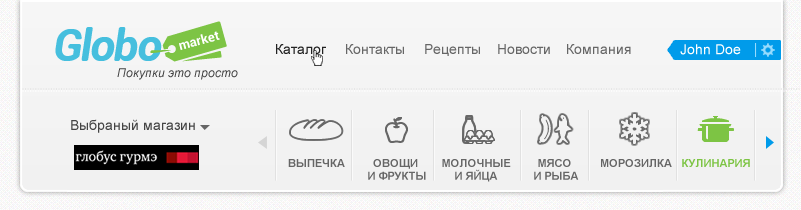
<style>
.page{position:relative;width:801px;height:210px}
.page>*{position:absolute;margin:0}
.t1{font:14px "ArialMT";color:#222222}
.t2{font:14px "ArialMT";color:#666666}
.t3{font:14px "ArialMT";color:#fefefe}
.t4{font:12px "Arial-ItalicMT";color:#444444}
.t5{font:14px "ArialMT";color:#444444}
.t6{font:11px "Arial-BoldMT";color:#666666}
.t7{font:11px/12.7px "Arial-BoldMT";color:#666666}
.t8{font:11px "Arial-BoldMT";color:#7dc444}
</style>
<div class="page">
<p class="t1" style="left:276px;top:44px;width:50px;height:10px">Каталог</p>
<p class="t2" style="left:346px;top:44px;width:58px;height:10px">Контакты</p>
<p class="t2" style="left:425px;top:44px;width:55px;height:12px">Рецепты</p>
<p class="t2" style="left:498px;top:44px;width:52px;height:10px">Новости</p>
<p class="t2" style="left:567px;top:44px;width:64px;height:10px">Компания</p>
<p class="t3" style="left:680px;top:44px;width:61px;height:11px">John Doe</p>
<p class="t4" style="left:117px;top:68px;width:121px;height:12px">Покупки это просто</p>
<p class="t5" style="left:71px;top:119px;width:124px;height:14px">Выбраный магазин</p>
<p class="t6" style="left:288px;top:159px;width:57px;height:8px">ВЫПЕЧКА</p>
<p class="t7" style="left:368px;top:159px;width:58px;height:21px;text-align:center">ОВОЩИ <br>И ФРУКТЫ</p>
<p class="t7" style="left:442px;top:159px;width:69px;height:23px;text-align:center">МОЛОЧНЫЕ<br>И ЯЙЦА</p>
<p class="t7" style="left:534px;top:159px;width:45px;height:21px;text-align:center">МЯСО <br>И РЫБА</p>
<p class="t6" style="left:601px;top:159px;width:71px;height:8px">МОРОЗИЛКА</p>
<p class="t8" style="left:682px;top:159px;width:68px;height:8px">КУЛИНАРИЯ</p>
</div>
